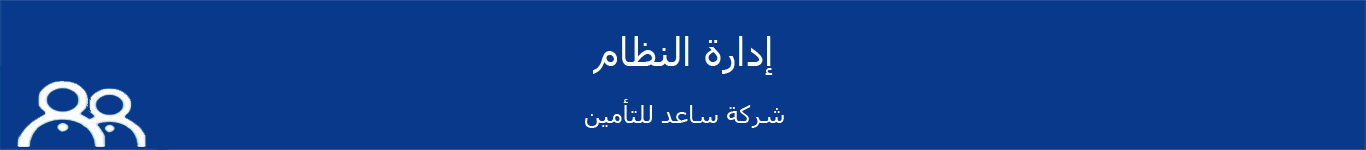
<style>
.page{position:relative;width:1366px;height:150px;background:#09398a}
.page>*{position:absolute;margin:0}
.t1{font:24px "Tahoma";color:#ffffff}
.t2{font:39px "Tahoma";color:#ffffff}
</style>
<div class="page">
<p class="t1" style="left:585px;top:36px;width:199px;height:92px;text-align:center"><span class="t2">إدارة النظام<br></span><br>شركة ساعد للتأمين</p>
</div>
